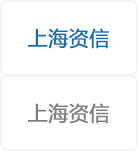
<style>
.page{position:relative;width:138px;height:151px;background:#ffffff}
.page>*{position:absolute;margin:0}
.t1{font:20px "MicrosoftYaHei";color:#096dc1;font-weight:bold}
.t2{font:20px "MicrosoftYaHei";color:#7d7d7d;font-weight:bold}
</style>
<div class="page">
<p class="t1" style="left:28px;top:28px;width:81px;height:21px">上海资信</p>
<p class="t2" style="left:28px;top:103px;width:81px;height:21px">上海资信</p>
</div>
